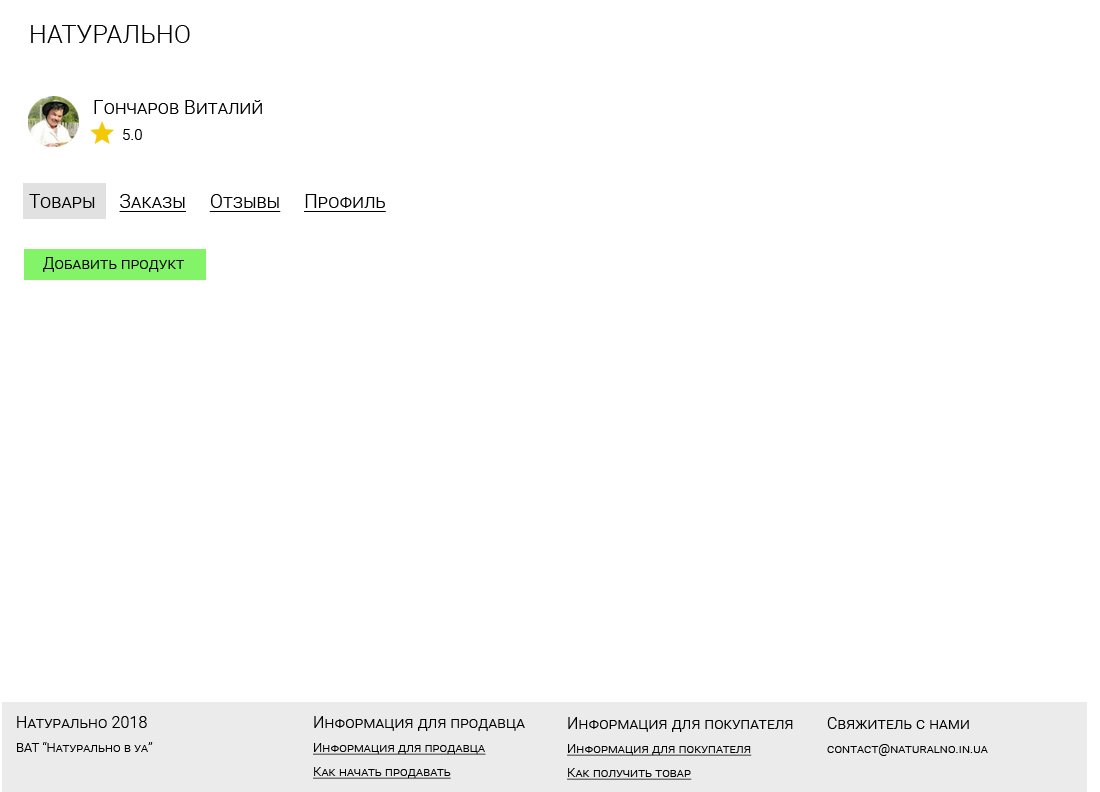
<style>
.page{position:relative;width:1100px;height:792px;background:#ffffff}
.page>*{position:absolute;margin:0}
.t1{font:25px "Roboto-Light";letter-spacing:0.01em;color:#000000;font-variant:small-caps}
.t2{font:19px "Roboto-Light";letter-spacing:0.01em;color:#000000;font-variant:small-caps}
.t3{font:15px "Roboto-Light";letter-spacing:0.01em;color:#000000;font-variant:small-caps}
.t4{font:19px "Roboto-Light";letter-spacing:0.01em;color:#000000;font-variant:small-caps;text-decoration:underline}
.t5{font:16px "Roboto-Light";letter-spacing:0.01em;color:#010101;font-variant:small-caps}
.t6{font:13px/24px "Roboto-Light";letter-spacing:0.01em;color:#000000;font-variant:small-caps}
.t7{font:16px/26px "Roboto-Light";letter-spacing:0.01em;color:#000000;font-variant:small-caps}
.t8{font:13px/24px "Roboto-Light";letter-spacing:0.01em;color:#000000;font-variant:small-caps;text-decoration:underline}
</style>
<div class="page">
<p class="t1" style="left:31px;top:25px;width:159px;height:18px">НАТУРАЛЬНО</p>
<p class="t2" style="left:94px;top:100px;width:168px;height:14px">Гончаров Виталий</p>
<p class="t3" style="left:123px;top:129px;width:19px;height:11px">5.0</p>
<p class="t4" style="left:29px;top:194px;width:357px;height:18px"><span class="t2">Товары     </span>Заказы     Отзывы     Профиль</p>
<p class="t5" style="left:43px;top:257px;width:141px;height:15px">Добавить продукт</p>
<p class="t6" style="left:17px;top:716px;width:136px;height:36px"><span class="t7">Натурально 2018<br></span>ВАТ “Натурально в уа”</p>
<p class="t8" style="left:313px;top:716px;width:212px;height:63px"><span class="t7">Информация для продавца<br></span>Информация для продавца<br>Как начать продавать</p>
<p class="t8" style="left:567px;top:717px;width:226px;height:63px"><span class="t7">Информация для покупателя<br></span>Информация для покупателя<br>Как получить товар</p>
<p class="t6" style="left:827px;top:717px;width:161px;height:39px"><span class="t7">Свяжитель с нами<br></span>contact@naturalno.in.ua</p>
</div>
